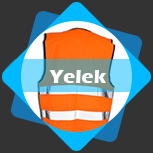
<style>
.page{position:relative;width:153px;height:153px;background:#333333}
.page>*{position:absolute;margin:0}
.t1{font:20.3px "ErasITC-Bold";color:#ffffff}
</style>
<div class="page">
<p class="t1" style="left:49px;top:70px;width:57px;height:13px">Yelek</p>
</div>
